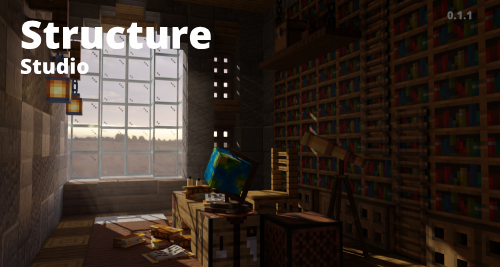
<style>
.page{position:relative;width:500px;height:267px}
.page>*{position:absolute;margin:0}
.t1{font:11px "OpenSans-ExtraBold";color:#5f5f5f}
.t2{font:39px "OpenSans-ExtraBold";color:#fefefe}
.t3{font:21px "OpenSans-ExtraBold";color:#fefefe}
</style>
<div class="page">
<p class="t1" style="left:447px;top:11px;width:25px;height:9px">0.1.1</p>
<p class="t2" style="left:20px;top:20px;width:191px;height:55px">Structure<br><span class="t3">Studio</span></p>
</div>
